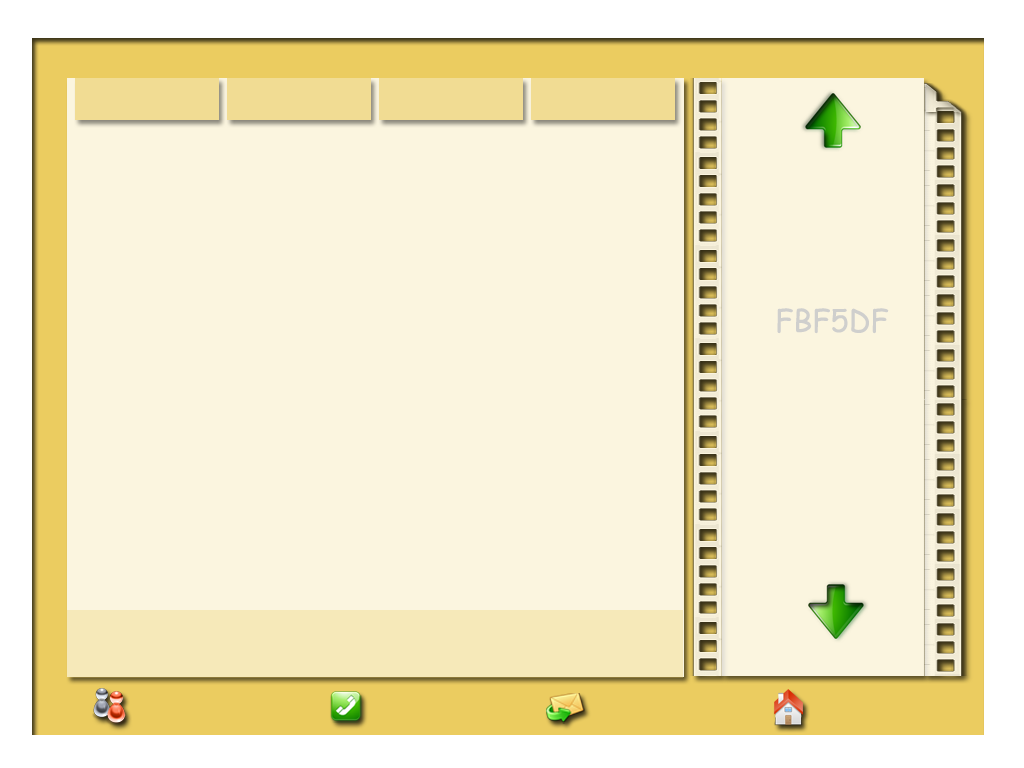
<style>
.page{position:relative;width:1024px;height:768px;background:#fbf5df}
.page>*{position:absolute;margin:0}
.t1{font:30px "ComicSansMS";color:#cfcfcd}
</style>
<div class="page">
<p class="t1" style="left:777px;top:308px;width:112px;height:26px">FBF5DF</p>
</div>
